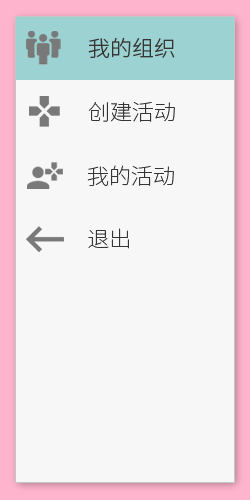
<style>
.page{position:relative;width:250px;height:500px;background:#f7f7f7}
.page>*{position:absolute;margin:0}
.t1{font:21.6px "NotoSansCJKsc-Light";color:#353535}
.t2{font:21.6px "NotoSansCJKsc-Thin";color:#353535}
</style>
<div class="page">
<p class="t1" style="left:88px;top:37px;width:87px;height:21px">我的组织</p>
<p class="t2" style="left:88px;top:102px;width:87px;height:20px">创建活动</p>
<p class="t2" style="left:87px;top:165px;width:87px;height:21px">我的活动</p>
<p class="t2" style="left:88px;top:228px;width:41px;height:21px">退出</p>
</div>
